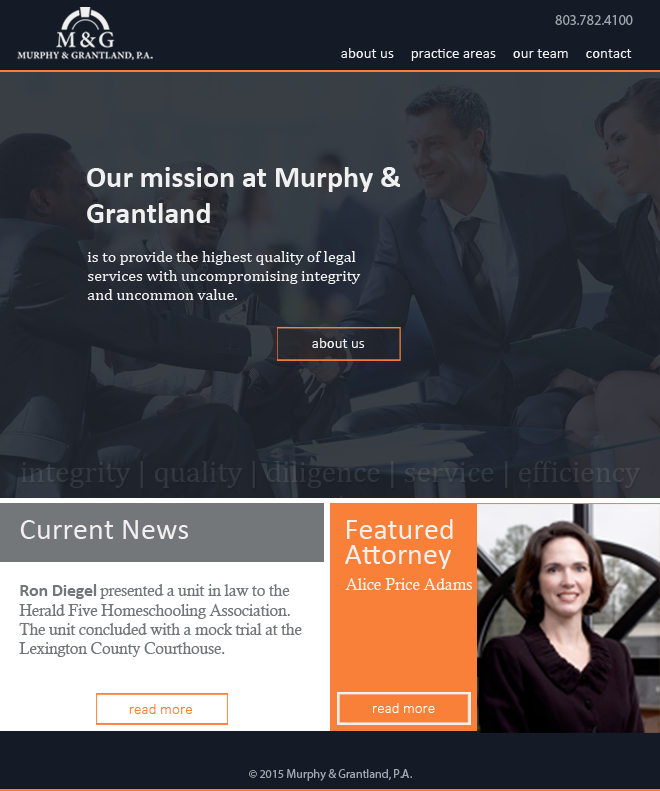
<style>
.page{position:relative;width:660px;height:791px}
.page>*{position:absolute;margin:0}
.t1{font:14px "MyriadPro-Regular";color:#9da6ad}
.t2{font:15px "Calibri";color:#f0f0f0}
.t3{font:30px "Calibri-Bold";color:#f0f0f0}
.t4{font:16px "Cambria";color:#f0f0f0}
.t5{font:30px "Cambria";color:#343941}
.t6{font:30.4px "Calibri";color:#f0f0f0}
.t7{font:30px/25px "Calibri";color:#f0f0f0}
.t8{font:16px "CalistoMT";color:#f0f0f0}
.t9{font:16.2px "CalistoMT";letter-spacing:-0.02em;color:#73777a}
.t10{font:18.2px "Calibri-Bold";letter-spacing:-0.02em;color:#73777a}
.t11{font:15.2px "Calibri-Light";color:#f98039}
.t12{font:15px "Calibri-Light";color:#ffffff}
.t13{font:12px "MyriadPro-Regular";color:#9da6ad}
</style>
<div class="page">
<p class="t1" style="left:555px;top:15px;width:78px;height:10px">803.782.4100</p>
<p class="t2" style="left:341px;top:48px;width:291px;height:13px">about us     practice areas     our team     contact</p>
<p class="t3" style="left:87px;top:167px;width:313px;height:56px">Our mission at Murphy &amp; <br>Grantland</p>
<p class="t4" style="left:87px;top:251px;width:274px;height:49px">is to provide the highest quality of legal <br>services with uncompromising integrity <br>and uncommon value.</p>
<p class="t2" style="left:312px;top:338px;width:53px;height:10px">about us</p>
<p class="t5" style="left:21px;top:461px;width:620px;height:27px">integrity | quality | diligence | service | efficiency</p>
<p class="t6" style="left:20px;top:520px;width:168px;height:19px">Current News</p>
<p class="t7" style="left:345px;top:519px;width:108px;height:50px">Featured <br>Attorney</p>
<p class="t8" style="left:345px;top:578px;width:127px;height:12px">Alice Price Adams</p>
<p class="t9" style="left:19px;top:584px;width:283px;height:73px"><span class="t10">Ron Diegel </span>presented a unit in law to the <br>Herald Five Homeschooling Association. <br>The unit concluded with a mock trial at the <br>Lexington County Courthouse.</p>
<p class="t11" style="left:129px;top:704px;width:63px;height:10px">read more</p>
<p class="t12" style="left:373px;top:703px;width:62px;height:10px">read more</p>
<p class="t13" style="left:249px;top:769px;width:163px;height:12px">© 2015 Murphy &amp; Grantland, P.A.</p>
</div>
